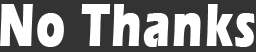
<style>
.page{position:relative;width:256px;height:52px;background:#333333}
.page>*{position:absolute;margin:0}
.t1{font:62.4px "ErasITC-Bold";letter-spacing:0.04em;color:#ffffff;font-weight:bold;scale:0.69 1}
</style>
<div class="page">
<p class="t1" style="left:0px;top:4px;width:255px;height:43px">No Thanks</p>
</div>
